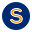
<style>
.page{position:relative;width:32px;height:32px;background:#002a70}
.page>*{position:absolute;margin:0}
.t1{font:20px "Nexa-Bold";letter-spacing:0.05em}
</style>
<div class="page">
<p class="t1" style="left:10px;top:8px;width:13px;height:16px">S</p>
</div>
